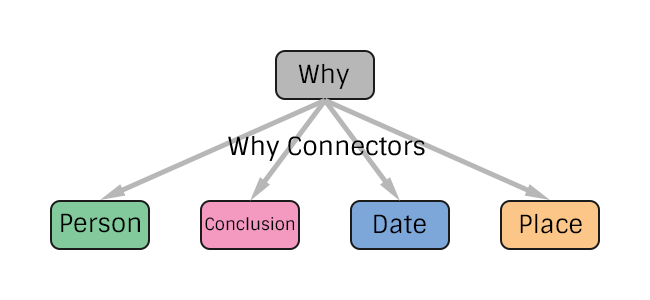
<style>
.page{position:relative;width:650px;height:300px;background:#ffffff}
.page>*{position:absolute;margin:0}
.t1{font:25px "Sintony";color:#000000}
.t2{font:16.7px "Sintony";color:#000000}
</style>
<div class="page">
<p class="t1" style="left:298px;top:63px;width:52px;height:27px">Why</p>
<p class="t1" style="left:228px;top:135px;width:197px;height:27px">Why Connectors</p>
<p class="t1" style="left:61px;top:213px;width:79px;height:20px">Person</p>
<p class="t2" style="left:205px;top:217px;width:90px;height:14px">Conclusion</p>
<p class="t1" style="left:374px;top:214px;width:52px;height:20px">Date</p>
<p class="t1" style="left:520px;top:213px;width:62px;height:21px">Place</p>
</div>
